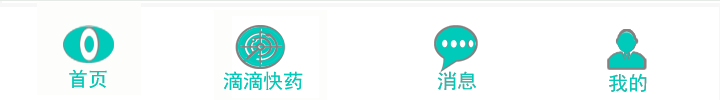
<style>
.page{position:relative;width:720px;height:100px;background:#ffffff}
.page>*{position:absolute;margin:0}
.t1{font:20px "SimHei";color:#00caba}
</style>
<div class="page">
<p class="t1" style="left:69px;top:69px;width:38px;height:19px">首页</p>
<p class="t1" style="left:69px;top:69px;width:38px;height:19px">首页</p>
<p class="t1" style="left:223px;top:71px;width:80px;height:19px">滴滴快药</p>
<p class="t1" style="left:223px;top:71px;width:80px;height:19px">滴滴快药</p>
<p class="t1" style="left:437px;top:71px;width:39px;height:19px">消息</p>
<p class="t1" style="left:437px;top:71px;width:39px;height:19px">消息</p>
<p class="t1" style="left:609px;top:73px;width:38px;height:19px">我的</p>
<p class="t1" style="left:609px;top:73px;width:38px;height:19px">我的</p>
</div>
